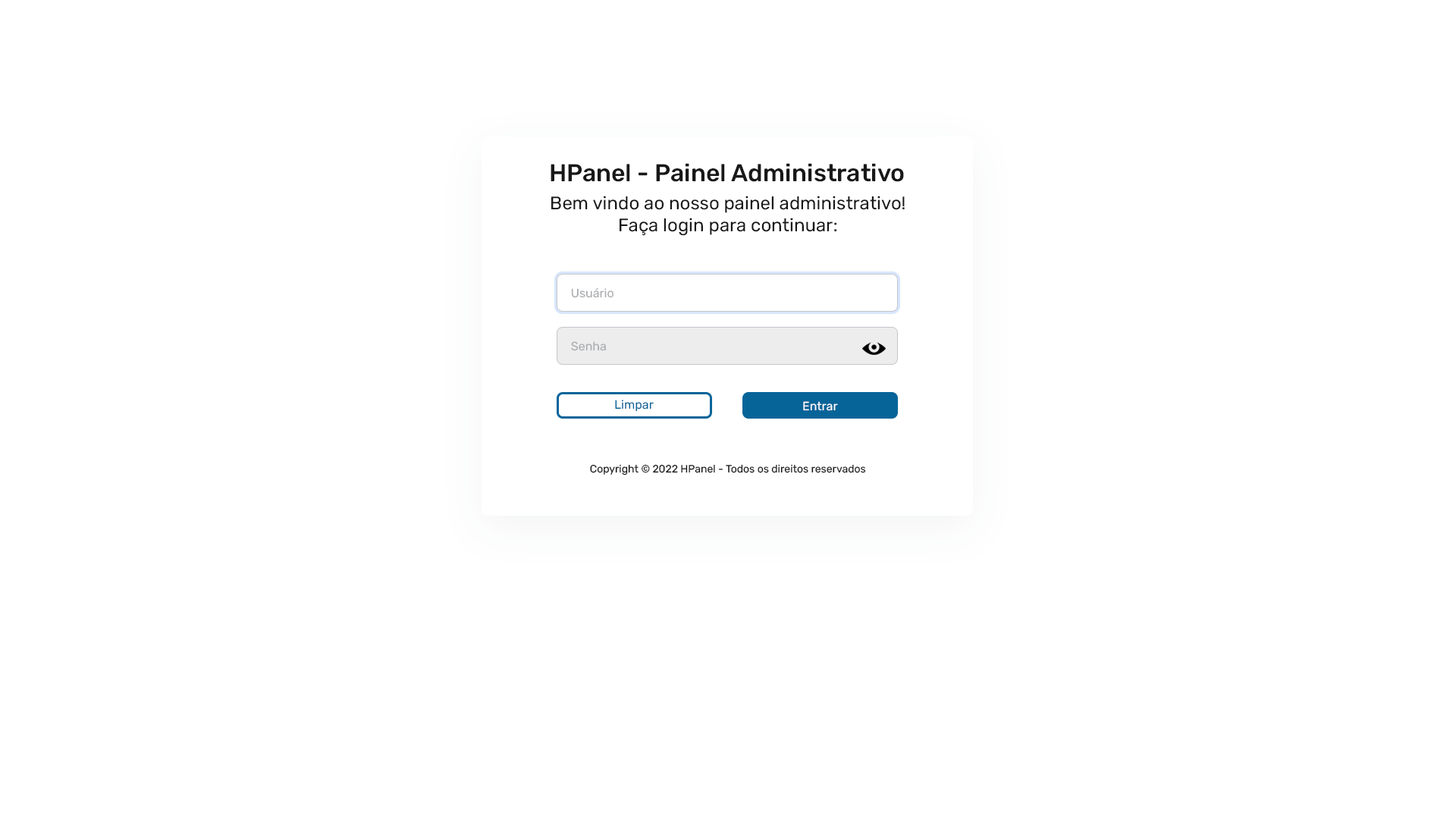
<style>
.page{position:relative;width:1456px;height:819px;background:#ffffff}
.page>*{position:absolute;margin:0}
.t1{font:24.3px "Rubik-Medium";color:#181818}
.t2{font:18.2px "Rubik-Regular";color:#181818}
.t3{font:12.1px "Rubik-Regular";color:#aaacaf}
.t4{font:12.1px "Rubik-Regular";color:#076499}
.t5{font:12.1px "Rubik-Regular";color:#ffffff}
.t6{font:10.6px "Rubik-Regular";color:#181818}
</style>
<div class="page">
<p class="t1" style="left:551px;top:163px;width:353px;height:19px">HPanel - Painel Administrativo</p>
<p class="t2" style="left:551px;top:196px;width:354px;height:40px;text-align:center">Bem vindo ao nosso painel administrativo!<br>Faça login para continuar:</p>
<p class="t3" style="left:571px;top:288px;width:42px;height:10px">Usuário</p>
<p class="t3" style="left:571px;top:341px;width:35px;height:10px">Senha</p>
<p class="t4" style="left:615px;top:400px;width:39px;height:12px">Limpar</p>
<p class="t5" style="left:803px;top:401px;width:35px;height:10px">Entrar</p>
<p class="t6" style="left:590px;top:464px;width:276px;height:11px">Copyright © 2022 HPanel - Todos os direitos reservados</p>
</div>
